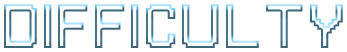
<style>
.page{position:relative;width:347px;height:52px;background:#ffffff}
.page>*{position:absolute;margin:0}
.t1{font:58.3px "PixelGameFont";text-transform:uppercase}
</style>
<div class="page">
<p class="t1" style="left:4px;top:4px;width:339px;height:44px">difficulty</p>
</div>
